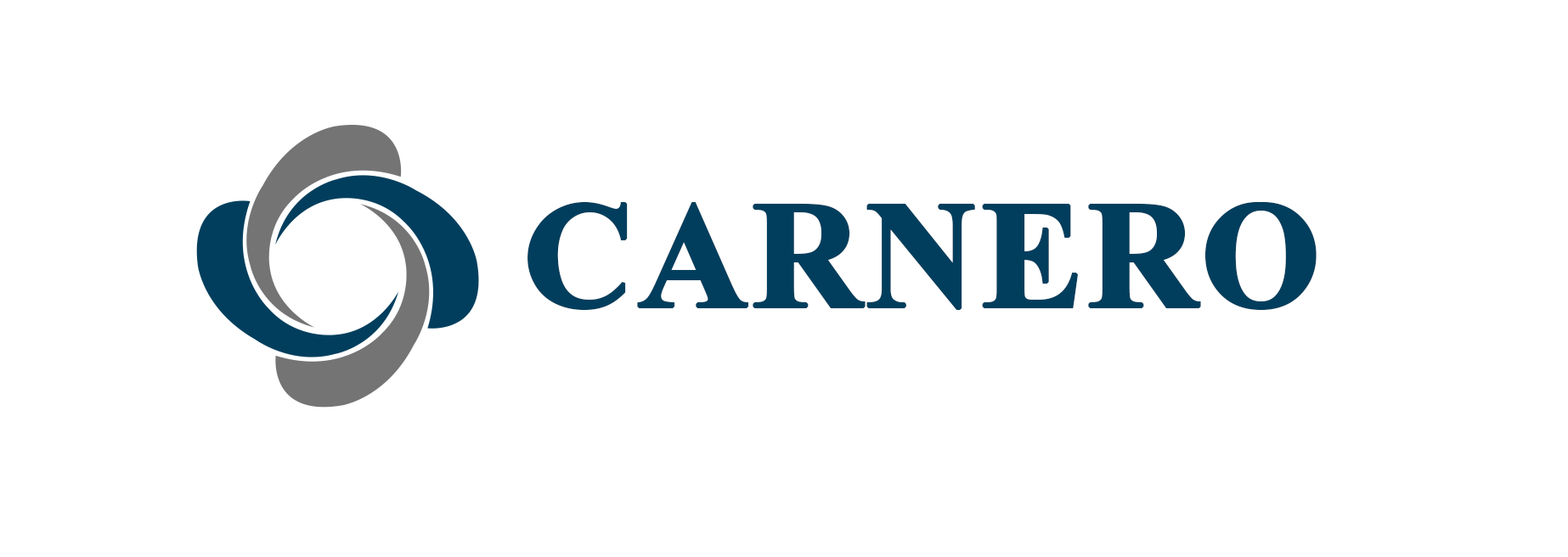
<style>
.page{position:relative;width:1568px;height:557px;background:#ffffff}
.page>*{position:absolute;margin:0}
.t1{font:152.8px "TimesNewRomanPS-BoldMT";color:#013e5d;text-transform:uppercase;font-weight:bold}
</style>
<div class="page">
<p class="t1" style="left:527px;top:201px;width:790px;height:110px">carnero</p>
</div>
